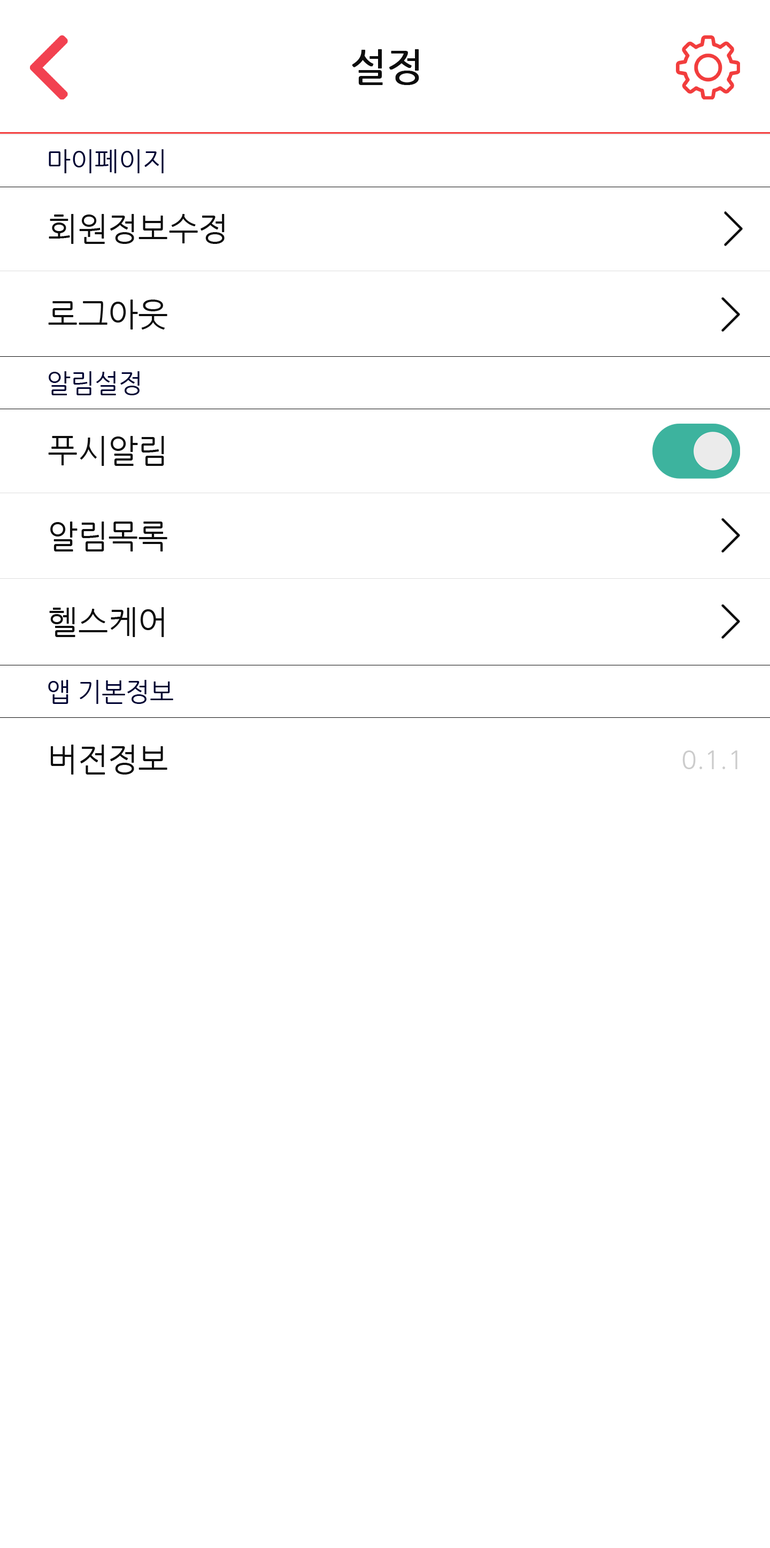
<style>
.page{position:relative;width:770px;height:1548px;background:#ffffff}
.page>*{position:absolute;margin:0}
.t1{font:38.5px "NanumGothic";color:#0d0d0d;font-weight:bold}
.t2{font:25.7px "NanumGothic";color:#000333}
.t3{font:32.1px/85.6px "NanumGothic";color:#0d0d0d}
.t4{font:32.1px "NanumGothic";color:#0d0d0d}
.t5{font:25.7px "NanumGothic";color:#cccccc}
</style>
<div class="page">
<p class="t1" style="left:352px;top:49px;width:67px;height:36px">설정</p>
<p class="t2" style="left:49px;top:149px;width:115px;height:24px">마이페이지</p>
<p class="t3" style="left:48px;top:214px;width:177px;height:116px">회원정보수정<br>로그아웃</p>
<p class="t2" style="left:49px;top:371px;width:91px;height:24px">알림설정</p>
<p class="t3" style="left:48px;top:436px;width:119px;height:201px">푸시알림<br>알림목록<br>헬스케어</p>
<p class="t2" style="left:48px;top:680px;width:125px;height:24px">앱 기본정보</p>
<p class="t4" style="left:51px;top:745px;width:116px;height:30px">버전정보</p>
<p class="t5" style="left:683px;top:750px;width:55px;height:19px">0.1.1</p>
</div>
